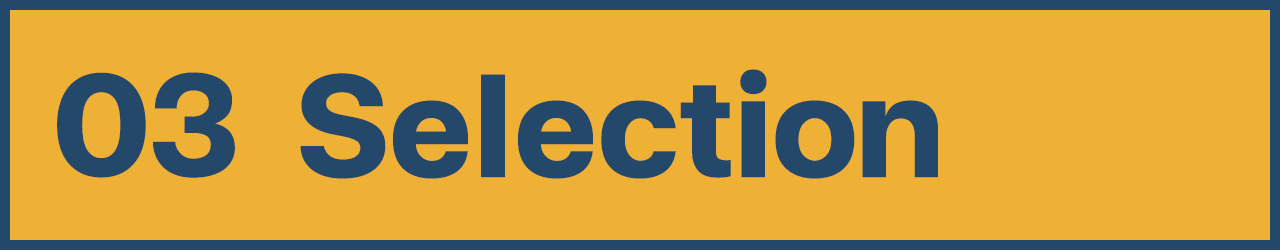
<style>
.page{position:relative;width:1280px;height:250px;background:#efb036}
.page>*{position:absolute;margin:0}
.t1{font:200px "FCMinimalBold";color:#23486a}
</style>
<div class="page">
<p class="t1" style="left:57px;top:72px;width:178px;height:106px">03</p>
<p class="t1" style="left:300px;top:69px;width:638px;height:110px">Selection</p>
</div>
